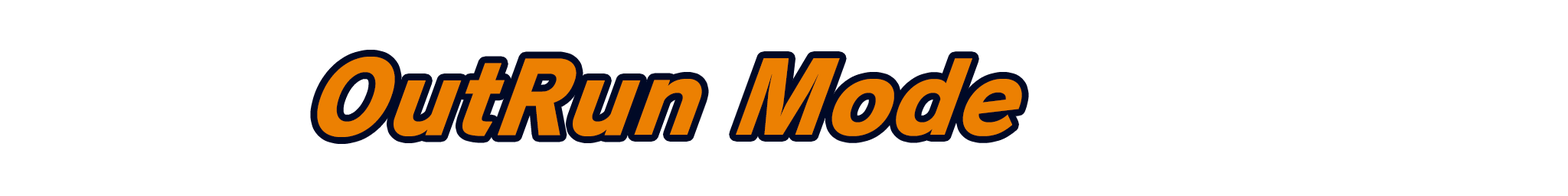
<style>
.page{position:relative;width:1568px;height:196px;background:#ffffff}
.page>*{position:absolute;margin:0}
.t1{font:104.1px "RodinPro-EB";letter-spacing:0.001em;color:#ec8002;scale:0.94 1}
</style>
<div class="page">
<p class="t1" style="left:317px;top:57px;width:705px;height:80px">OutRun Mode</p>
</div>
